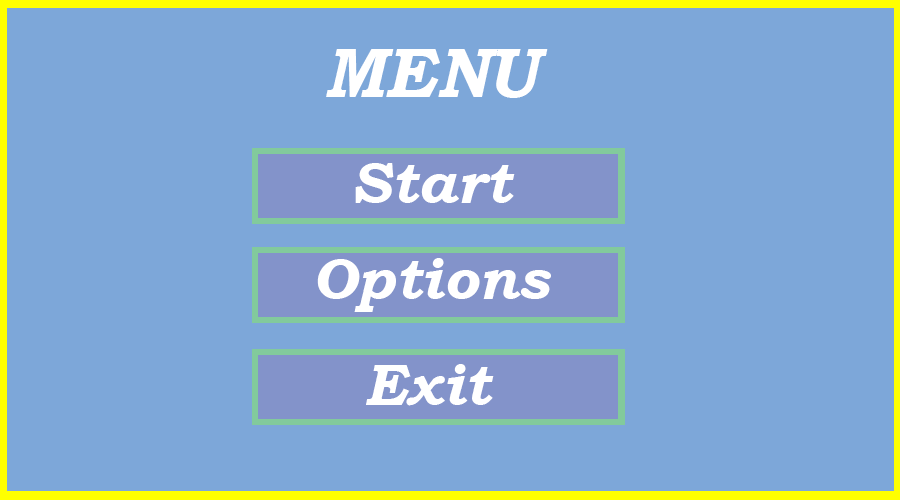
<style>
.page{position:relative;width:900px;height:500px;background:#7da7d9}
.page>*{position:absolute;margin:0}
.t1{font:70px "BookmanOldStyle-BoldItalic";color:#ffffff}
.t2{font:58.3px "BookmanOldStyle-BoldItalic";color:#ffffff}
</style>
<div class="page">
<p class="t1" style="left:326px;top:49px;width:222px;height:49px">MENU</p>
<p class="t2" style="left:355px;top:163px;width:160px;height:40px">Start</p>
<p class="t2" style="left:317px;top:258px;width:234px;height:54px">Options</p>
<p class="t2" style="left:366px;top:364px;width:128px;height:42px">Exit</p>
</div>
